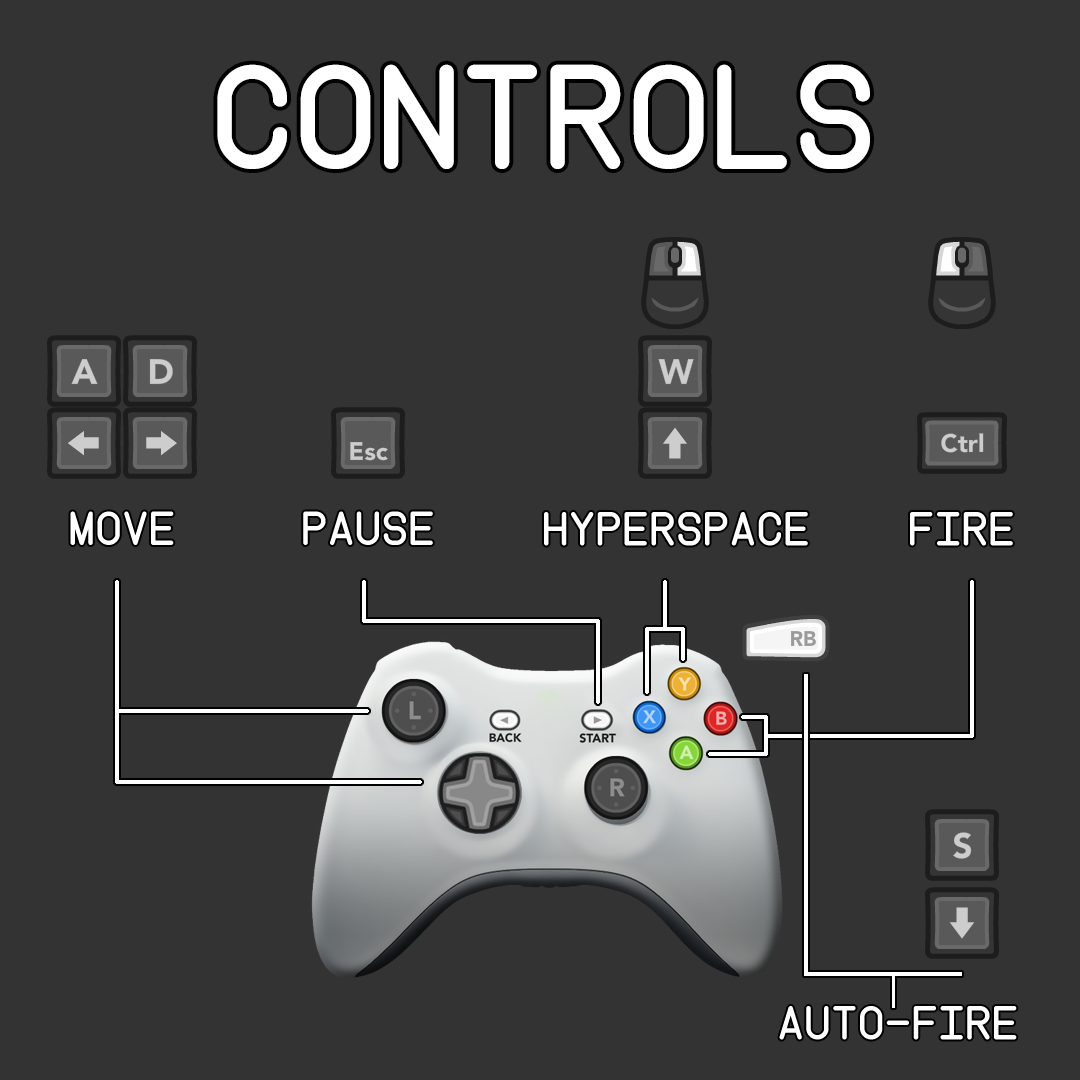
<style>
.page{position:relative;width:1080px;height:1080px;background:#333333}
.page>*{position:absolute;margin:0}
.t1{font:142.1px "Instruction";color:#ffffff}
.t2{font:45.8px "Instruction";color:#ffffff}
</style>
<div class="page">
<p class="t1" style="left:217px;top:64px;width:653px;height:105px">CONTROLS</p>
<p class="t2" style="left:70px;top:511px;width:104px;height:34px">MOVE</p>
<p class="t2" style="left:303px;top:511px;width:130px;height:34px">PAUSE</p>
<p class="t2" style="left:544px;top:512px;width:264px;height:34px">hyperspace</p>
<p class="t2" style="left:910px;top:512px;width:103px;height:34px">Fire</p>
<p class="t2" style="left:779px;top:1006px;width:238px;height:34px">AUTO-FIRE</p>
</div>
